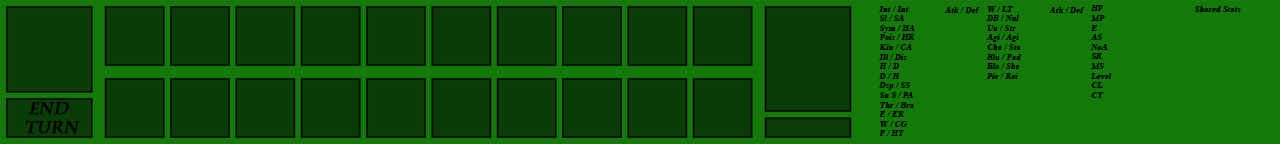
<style>
.page{position:relative;width:1280px;height:144px;background:#0a3d05}
.page>*{position:absolute;margin:0}
.t1{font:8px "TimesNewRomanPS-BoldMT";color:#000000;font-weight:bold;font-style:italic}
.t2{font:16px "CharlemagneStd-Bold";color:#000000;font-weight:bold;font-style:italic}
</style>
<div class="page">
<p class="t1" style="left:879px;top:6px;width:36px;height:130px">Int / Int<br>Sl / SA<br>Sym / HA<br>Pois / HR<br>Kin / CA<br>Ill / Dis<br>H / D<br>D / H<br>Dsp / SS<br>Su S / PA<br>Thr / Bra<br>E / ER<br>W / CG<br>F / HT</p>
<p class="t1" style="left:986px;top:6px;width:35px;height:73px">W / LT<br>DB / Nul<br>Un / Str<br>Agi / Agi<br>Cha / Sta<br>Blu / Pad<br>Bla / She<br>Pie / Rei</p>
<p class="t1" style="left:1091px;top:5px;width:21px;height:93px">HP<br>MP<br>E<br>AS<br>NoA<br>SR<br>MS<br>Level<br>CL<br>CT</p>
<p class="t1" style="left:1194px;top:6px;width:47px;height:6px">Shared Stats</p>
<p class="t1" style="left:944px;top:7px;width:36px;height:6px">Atk / Def</p>
<p class="t1" style="left:1049px;top:7px;width:36px;height:6px">Atk / Def</p>
<p class="t2" style="left:25px;top:101px;width:55px;height:33px;text-align:center">END <br>TURN</p>
</div>
